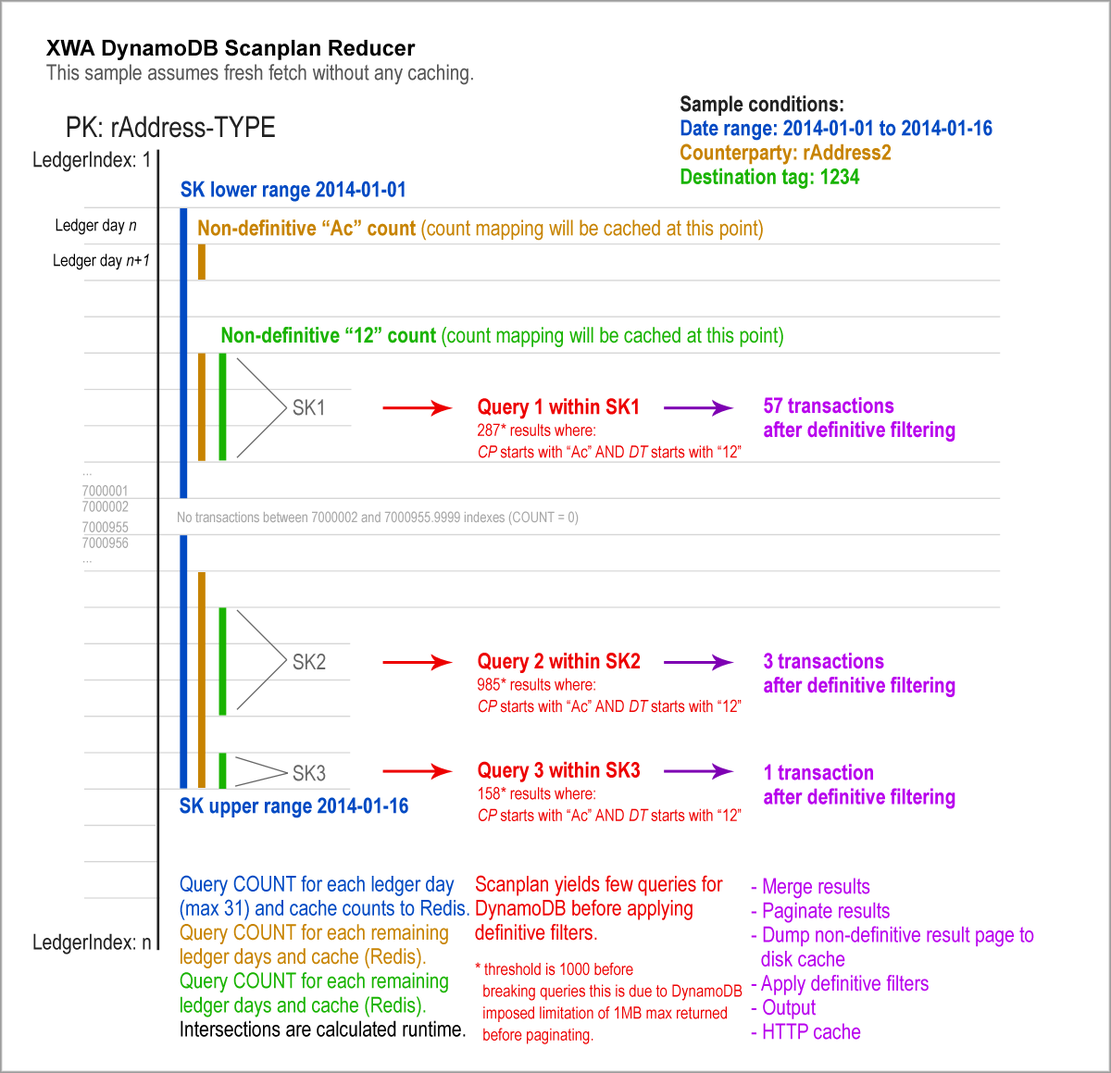
<style>
.page{position:relative;width:1111px;height:1073px;background:#ffffff}
.page>*{position:absolute;margin:0}
.t1{font:21.8px/24.2px "ArialNarrow";color:#565656}
.t2{font:21.8px/24.2px "Arial-BoldMT";color:#000000}
.t3{font:21.8px/24.2px "ArialNarrow-Bold";color:#014ac3}
.t4{font:21.8px/24.2px "ArialNarrow-Bold";color:#212121}
.t5{font:21.8px/24.2px "ArialNarrow-Bold";color:#c78300}
.t6{font:21.8px/24.2px "ArialNarrow-Bold";color:#19b300}
.t7{font:29.1px "ArialNarrow";color:#212121}
.t8{font:21.8px "ArialNarrow";color:#212121}
.t9{font:21.8px "ArialNarrow-Bold";color:#014ac3}
.t10{font:17px "ArialNarrow";color:#000000}
.t11{font:17px "ArialNarrow-Italic";color:#000000}
.t12{font:21.8px "ArialNarrow";color:#c78300}
.t13{font:21.8px "ArialNarrow-Bold";color:#c78300}
.t14{font:21.8px "ArialNarrow";color:#19b300}
.t15{font:21.8px "ArialNarrow-Bold";color:#19b300}
.t16{font:21.8px "ArialNarrow";color:#666666}
.t17{font:17px/21.8px "ArialNarrow";color:#ed0000}
.t18{font:21.8px/21.8px "ArialNarrow-Bold";color:#ed0000}
.t19{font:17px/21.8px "ArialNarrow-Italic";color:#ed0000}
.t20{font:21.8px/24.2px "ArialNarrow-Bold";color:#b800ed}
.t21{font:14.5px "ArialNarrow";color:#a8a8a8}
.t22{font:21.8px/24.2px "ArialNarrow-Bold";color:#ed0000}
.t23{font:21.8px/24.2px "ArialNarrow";color:#014ac3}
.t24{font:21.8px/24.2px "ArialNarrow";color:#c78300}
.t25{font:21.8px/24.2px "ArialNarrow";color:#19b300}
.t26{font:21.8px/24.2px "ArialNarrow";color:#000000}
.t27{font:21.8px/24.2px "ArialNarrow";color:#ed0000}
.t28{font:21.8px/24.2px "ArialNarrow";color:#b800ed}
</style>
<div class="page">
<p class="t1" style="left:46px;top:39px;width:427px;height:46px"><span class="t2">XWA DynamoDB Scanplan Reducer<br></span>This sample assumes fresh fetch without any caching.</p>
<p class="t3" style="left:681px;top:95px;width:312px;height:94px"><span class="t4">Sample conditions:<br></span>Date range: 2014-01-01 to 2014-01-16<br><span class="t5">Counterparty: rAddress2<br></span><span class="t6">Destination tag: 1234</span></p>
<p class="t7" style="left:67px;top:116px;width:208px;height:22px">PK: rAddress-TYPE</p>
<p class="t8" style="left:33px;top:151px;width:116px;height:21px">LedgerIndex: 1</p>
<p class="t9" style="left:181px;top:181px;width:224px;height:21px">SK lower range 2014-01-01</p>
<p class="t10" style="left:56px;top:219px;width:80px;height:16px">Ledger day<span class="t11"> n</span></p>
<p class="t12" style="left:198px;top:219px;width:565px;height:22px"><span class="t13">Non-definitive “Ac” count </span>(count mapping will be cached at this point)</p>
<p class="t10" style="left:54px;top:254px;width:95px;height:16px">Ledger day<span class="t11"> n+1</span></p>
<p class="t14" style="left:221px;top:327px;width:562px;height:20px"><span class="t15">Non-definitive “12” count</span> (count mapping will be cached at this point)</p>
<p class="t16" style="left:293px;top:399px;width:30px;height:17px">SK1</p>
<p class="t17" style="left:478px;top:398px;width:264px;height:60px"><span class="t18">Query 1 within SK1<br></span>287* results where:<br><span class="t19">CP </span>starts with “Ac” AND <span class="t19">DT</span> starts with “12”</p>
<p class="t20" style="left:764px;top:397px;width:192px;height:45px">57 transactions<br>after definitive filtering</p>
<p class="t21" style="left:83px;top:473px;width:9px;height:3px">...</p>
<p class="t21" style="left:82px;top:485px;width:45px;height:11px">7000001</p>
<p class="t21" style="left:82px;top:501px;width:47px;height:11px">7000002</p>
<p class="t21" style="left:82px;top:521px;width:47px;height:11px">7000955</p>
<p class="t21" style="left:178px;top:511px;width:401px;height:15px">No transactions between 7000002 and 7000955.9999 indexes (COUNT = 0)</p>
<p class="t21" style="left:82px;top:537px;width:47px;height:11px">7000956</p>
<p class="t21" style="left:83px;top:561px;width:9px;height:2px">...</p>
<p class="t16" style="left:293px;top:654px;width:33px;height:16px">SK2</p>
<p class="t17" style="left:478px;top:653px;width:264px;height:60px"><span class="t22">Query 2 within SK2<br></span>985* results where:<br><span class="t19">CP </span>starts with “Ac” AND <span class="t19">DT</span> starts with “12”</p>
<p class="t20" style="left:764px;top:653px;width:192px;height:44px">3 transactions<br>after definitive filtering</p>
<p class="t17" style="left:478px;top:761px;width:264px;height:60px"><span class="t22">Query 3 within SK3<br></span>158* results where:<br><span class="t19">CP </span>starts with “Ac” AND <span class="t19">DT</span> starts with “12”</p>
<p class="t16" style="left:293px;top:765px;width:33px;height:16px">SK3</p>
<p class="t20" style="left:764px;top:764px;width:192px;height:45px">1 transaction<br>after definitive filtering</p>
<p class="t9" style="left:180px;top:797px;width:228px;height:22px">SK upper range 2014-01-16</p>
<p class="t23" style="left:180px;top:875px;width:289px;height:162px">Query COUNT for each ledger day (max 31) and cache counts to Redis.<br><span class="t24">Query COUNT for each remaining ledger days and cache (Redis).<br></span><span class="t25">Query COUNT for each remaining ledger days and cache (Redis).<br></span><span class="t26">Intersections are calculated runtime.</span></p>
<p class="t27" style="left:475px;top:875px;width:248px;height:66px">Scanplan yields few queries for DynamoDB before applying definitive filters.</p>
<p class="t28" style="left:751px;top:878px;width:283px;height:162px">- Merge results<br>- Paginate results<br>- Dump non-definitive result page to<br>  disk cache<br>- Apply definitive filters<br>- Output<br>- HTTP cache</p>
<p class="t8" style="left:33px;top:933px;width:118px;height:22px">LedgerIndex: n</p>
<p class="t17" style="left:475px;top:962px;width:268px;height:82px">* threshold is 1000 before<br>  breaking queries this is due to DynamoDB<br>  imposed limitation of 1MB max returned<br>  before paginating.</p>
</div>
